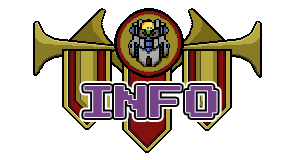
<style>
.page{position:relative;width:300px;height:160px;background:#ffffff}
.page>*{position:absolute;margin:0}
.t1{font:35px "PressStart2P-Regular";letter-spacing:0.01em;color:#76428a}
</style>
<div class="page">
<p class="t1" style="left:84px;top:86px;width:133px;height:31px">INFO</p>
<p class="t1" style="left:84px;top:86px;width:133px;height:31px">INFO</p>
<p class="t1" style="left:84px;top:86px;width:133px;height:31px">INFO</p>
</div>
